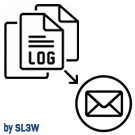
<style>
.page{position:relative;width:135px;height:135px;background:#ffffff}
.page>*{position:absolute;margin:0}
.t1{font:10.8px "FranklinGothic-Medium";color:#1d4971;font-weight:bold;scale:0.83 1}
</style>
<div class="page">
<p class="t1" style="left:4px;top:123px;width:36px;height:11px">by SL3W</p>
</div>
